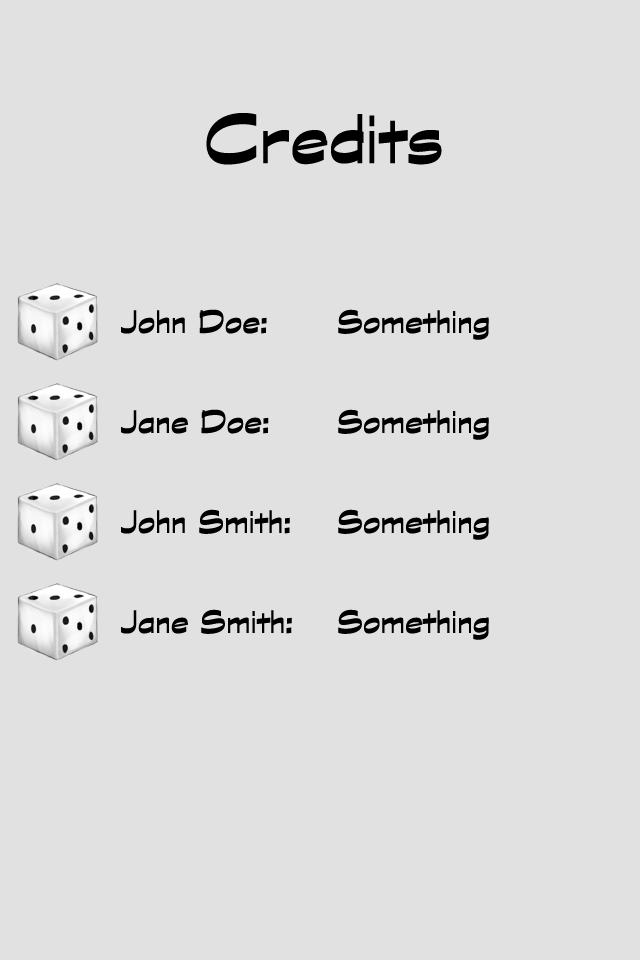
<style>
.page{position:relative;width:640px;height:960px;background:#e1e1e1}
.page>*{position:absolute;margin:0}
.t1{font:78px "GraphiteStd-Bold";color:#000000}
.t2{font:36px "GraphiteStd-Bold";color:#000000}
</style>
<div class="page">
<p class="t1" style="left:206px;top:113px;width:236px;height:52px">Credits</p>
<p class="t2" style="left:121px;top:309px;width:368px;height:31px">John Doe:  Something</p>
<p class="t2" style="left:121px;top:409px;width:368px;height:31px">Jane Doe:  Something</p>
<p class="t2" style="left:121px;top:509px;width:368px;height:31px">John Smith:  Something</p>
<p class="t2" style="left:121px;top:609px;width:368px;height:31px">Jane Smith:  Something</p>
</div>
